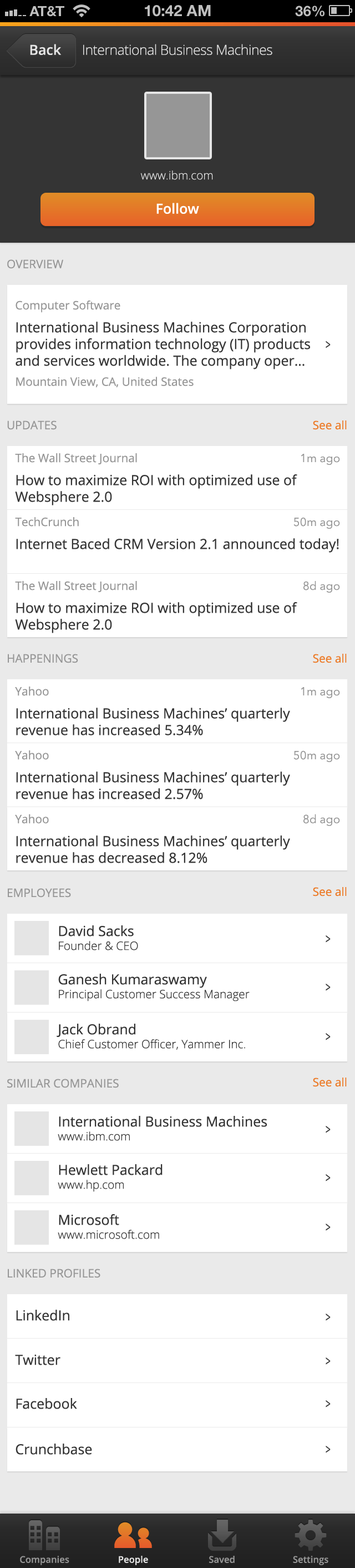
<style>
.page{position:relative;width:355px;height:1568px;background:#ffffff}
.page>*{position:absolute;margin:0}
.t1{font:13.9px "OpenSans-Semibold";color:#e5e5e5}
.t2{font:13.9px "OpenSans-Light";letter-spacing:-0.025em;color:#e5e5e5}
.t3{font:11.6px "OpenSans-Light";color:#e5e5e5}
.t4{font:13.9px "OpenSans-Semibold";color:#ffffff}
.t5{font:11.6px "OpenSans";color:#969696}
.t6{font:13.9px "OpenSans";color:#343434}
.t7{font:13.9px "OpenSans";color:#343434;scale:0.64 1}
.t8{font:11.6px "OpenSans";color:#ec7a27}
.t9{font:11.6px "AvenirNext-Regular";color:#969696}
.t10{font:11.6px "OpenSans-Light";color:#343434}
.t11{font:9.3px "OpenSans-Semibold";color:#969696}
.t12{font:9.3px "OpenSans-Semibold";color:#e5e5e5}
</style>
<div class="page">
<p class="t1" style="left:30px;top:44px;width:32px;height:11px">Back</p>
<p class="t2" style="left:83px;top:44px;width:190px;height:11px">International Business Machines</p>
<p class="t3" style="left:141px;top:171px;width:72px;height:9px">www.ibm.com</p>
<p class="t4" style="left:157px;top:203px;width:42px;height:11px">Follow</p>
<p class="t5" style="left:7px;top:259px;width:56px;height:10px">OVERVIEW</p>
<p class="t6" style="left:16px;top:300px;width:294px;height:88px"><span class="t5">Computer Software<br></span>International Business Machines Corporation provides information technology (IT) products and services worldwide. The company oper…<br><span class="t5">Mountain View, CA, United States</span></p>
<p class="t7" style="left:326px;top:341px;width:5px;height:7px">&gt;</p>
<p class="t5" style="left:7px;top:420px;width:50px;height:10px">UPDATES</p>
<p class="t8" style="left:313px;top:420px;width:34px;height:10px">See all</p>
<p class="t6" style="left:15px;top:453px;width:283px;height:52px"><span class="t5">The Wall Street Journal<br></span>How to maximize ROI with optimized use of Websphere 2.0</p>
<p class="t9" style="left:302px;top:454px;width:38px;height:11px">1m ago</p>
<p class="t6" style="left:15px;top:517px;width:324px;height:36px"><span class="t5">TechCrunch<br></span>Internet Baced CRM Version 2.1 announced today!</p>
<p class="t9" style="left:294px;top:517px;width:46px;height:12px">50m ago</p>
<p class="t6" style="left:15px;top:581px;width:283px;height:52px"><span class="t5">The Wall Street Journal<br></span>How to maximize ROI with optimized use of Websphere 2.0</p>
<p class="t9" style="left:304px;top:581px;width:36px;height:12px">8d ago</p>
<p class="t5" style="left:8px;top:654px;width:70px;height:9px">HAPPENINGS</p>
<p class="t8" style="left:313px;top:654px;width:34px;height:9px">See all</p>
<p class="t6" style="left:15px;top:687px;width:275px;height:48px"><span class="t5">Yahoo<br></span>International Business Machines’ quarterly revenue has increased 5.34%</p>
<p class="t9" style="left:302px;top:687px;width:38px;height:11px">1m ago</p>
<p class="t6" style="left:15px;top:750px;width:275px;height:49px"><span class="t5">Yahoo<br></span>International Business Machines’ quarterly revenue has increased 2.57%</p>
<p class="t9" style="left:294px;top:750px;width:46px;height:12px">50m ago</p>
<p class="t6" style="left:15px;top:814px;width:275px;height:49px"><span class="t5">Yahoo<br></span>International Business Machines’ quarterly revenue has decreased 8.12%</p>
<p class="t9" style="left:304px;top:814px;width:36px;height:12px">8d ago</p>
<p class="t5" style="left:8px;top:888px;width:63px;height:10px">EMPLOYEES</p>
<p class="t8" style="left:313px;top:887px;width:34px;height:9px">See all</p>
<p class="t10" style="left:59px;top:925px;width:79px;height:25px"><span class="t6">David Sacks<br></span>Founder &amp; CEO</p>
<p class="t7" style="left:326px;top:935px;width:5px;height:8px">&gt;</p>
<p class="t10" style="left:58px;top:974px;width:192px;height:27px"><span class="t6">Ganesh Kumaraswamy<br></span>Principal Customer Success Manager</p>
<p class="t7" style="left:326px;top:984px;width:5px;height:7px">&gt;</p>
<p class="t10" style="left:57px;top:1024px;width:189px;height:26px"><span class="t6">Jack Obrand<br></span>Chief Customer Officer, Yammer Inc.</p>
<p class="t7" style="left:326px;top:1033px;width:5px;height:7px">&gt;</p>
<p class="t5" style="left:7px;top:1079px;width:112px;height:9px">SIMILAR COMPANIES</p>
<p class="t8" style="left:313px;top:1078px;width:34px;height:9px">See all</p>
<p class="t6" style="left:58px;top:1116px;width:210px;height:25px">International Business Machines<br><span class="t10">www.ibm.com</span></p>
<p class="t7" style="left:326px;top:1126px;width:5px;height:7px">&gt;</p>
<p class="t6" style="left:58px;top:1164px;width:105px;height:28px">Hewlett Packard<br><span class="t10">www.hp.com</span></p>
<p class="t7" style="left:326px;top:1174px;width:5px;height:7px">&gt;</p>
<p class="t10" style="left:58px;top:1214px;width:101px;height:25px"><span class="t6">Microsoft<br></span>www.microsoft.com</p>
<p class="t7" style="left:326px;top:1224px;width:5px;height:7px">&gt;</p>
<p class="t5" style="left:8px;top:1269px;width:93px;height:9px">LINKED PROFILES</p>
<p class="t6" style="left:16px;top:1310px;width:53px;height:11px">LinkedIn</p>
<p class="t7" style="left:326px;top:1314px;width:5px;height:7px">&gt;</p>
<p class="t6" style="left:15px;top:1354px;width:46px;height:11px">Twitter</p>
<p class="t7" style="left:326px;top:1357px;width:5px;height:8px">&gt;</p>
<p class="t6" style="left:16px;top:1398px;width:61px;height:11px">Facebook</p>
<p class="t7" style="left:326px;top:1400px;width:5px;height:7px">&gt;</p>
<p class="t6" style="left:16px;top:1444px;width:76px;height:11px">Crunchbase</p>
<p class="t7" style="left:326px;top:1446px;width:5px;height:7px">&gt;</p>
<p class="t11" style="left:20px;top:1556px;width:49px;height:9px">Companies</p>
<p class="t12" style="left:119px;top:1556px;width:29px;height:9px">People</p>
<p class="t11" style="left:209px;top:1556px;width:26px;height:7px">Saved</p>
<p class="t11" style="left:293px;top:1556px;width:36px;height:9px">Settings</p>
</div>
